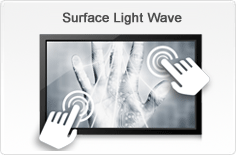
<style>
.page{position:relative;width:236px;height:155px}
.page>*{position:absolute;margin:0}
.t1{font:13px "ArialMT";color:#4e4e4e;font-weight:bold}
</style>
<div class="page">
<p class="t1" style="left:62px;top:12px;width:120px;height:13px">Surface Light Wave</p>
</div>
